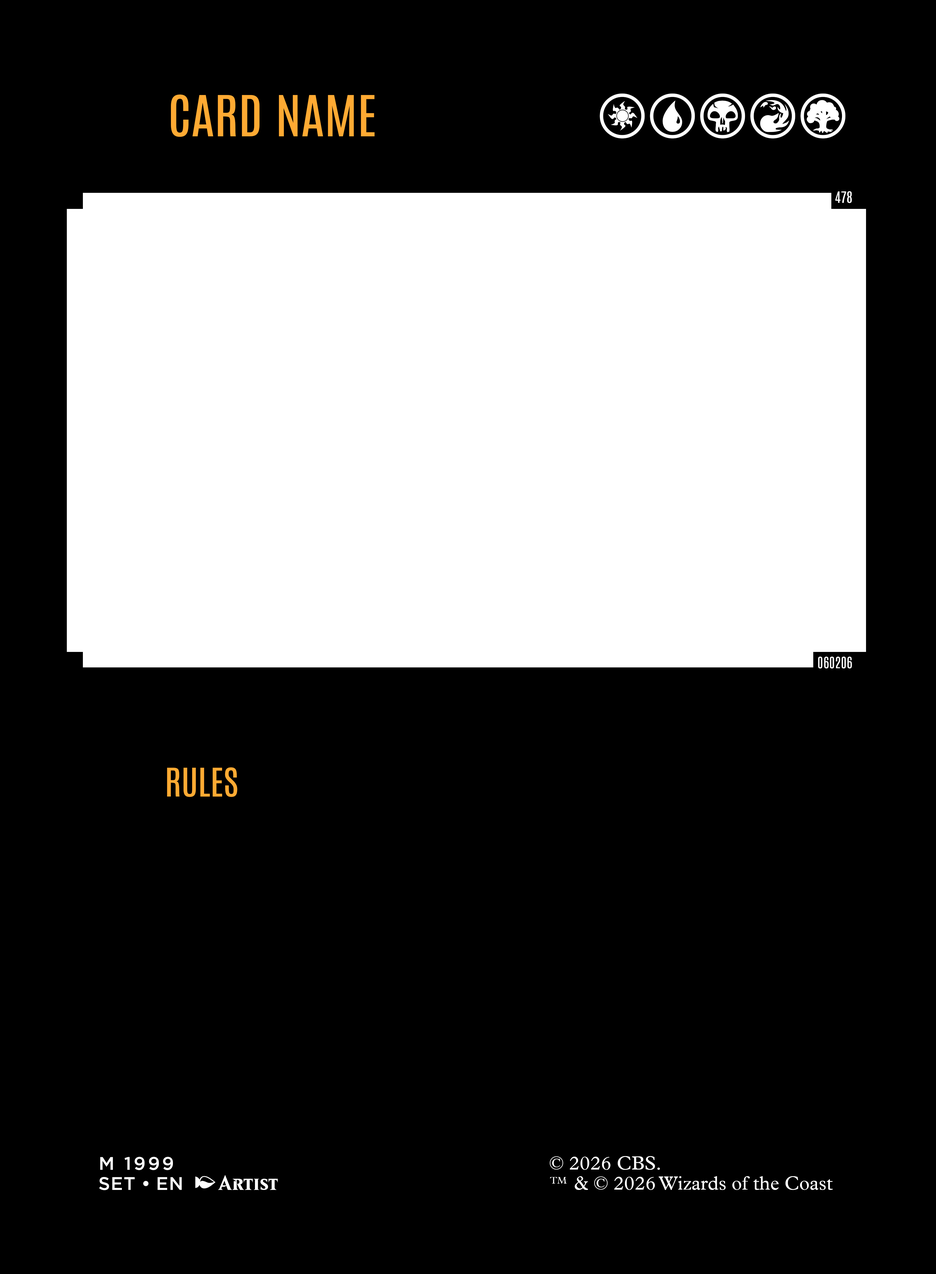
<style>
.page{position:relative;width:936px;height:1274px;background:#000000}
.page>*{position:absolute;margin:0}
.t1{font:48px "Antonio-Regular";color:#ffaa33;text-transform:uppercase;scale:1.09 1}
.t2{font:57.4px "LCARSGlyph";color:#ffffff}
.t3{font:13.4px "Antonio-Regular";color:#ffffff;scale:1.05 1}
.t4{font:33.5px "Antonio-Regular";color:#ffaa33;text-transform:uppercase;scale:1.08 1}
.t5{font:18.2px "Gotham-Medium";letter-spacing:0.125em;color:#ffffff}
.t6{font:19.1px "PlantinOUP";color:#ffffff}
.t7{font:20.4px "BelerenSmallCaps-Bold";color:#ffffff}
.t8{font:18.2px "Gotham-Medium";letter-spacing:0.04em;color:#ffffff}
.t9{font:18.2px "Gotham-Medium";color:#ffffff}
.t10{font:22.2px "Proxyglyph";letter-spacing:0.2em;color:#ffffff}
.t11{font:9.6px "PlantinOUP";color:#ffffff}
</style>
<div class="page">
<p class="t1" style="left:171px;top:94px;width:204px;height:43px">CARD NAME</p>
<p class="t2" style="left:600px;top:94px;width:246px;height:45px">wubrg</p>
<p class="t3" style="left:836px;top:191px;width:16px;height:12px">478</p>
<p class="t3" style="left:818px;top:656px;width:34px;height:12px">060206</p>
<p class="t4" style="left:167px;top:767px;width:71px;height:30px">RULES</p>
<p class="t5" style="left:100px;top:1156px;width:73px;height:14px">M 1999</p>
<p class="t6" style="left:550px;top:1156px;width:110px;height:13px">© 2026 CBS.</p>
<p class="t7" style="left:99px;top:1175px;width:179px;height:15px"><span class="t8">SET</span><span class="t9"> • </span><span class="t8">EN </span><span class="t10">a</span>Artist</p>
<p class="t11" style="left:550px;top:1177px;width:17px;height:6px">TM</p>
<p class="t6" style="left:575px;top:1176px;width:258px;height:14px">&amp; © 2026 Wizards of the Coast</p>
</div>
